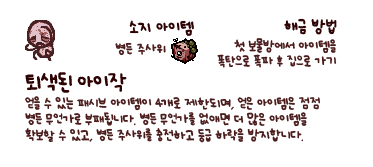
<style>
.page{position:relative;width:373px;height:167px;background:#ffffff}
.page>*{position:absolute;margin:0}
.t1{font:12px "UhBeeSe_hyunBold";color:#2e0304}
.t2{font:12px "UhBeeSe_hyunBold";letter-spacing:-0.1em;color:#2e0304}
.t3{font:12px "UhBeeSe_hyunBold";letter-spacing:-0.15em;color:#2e0304}
.t4{font:10px/14.5px "UhBeeSe_hyunBold";letter-spacing:-0.025em;color:#4b1c1c}
.t5{font:10px "UhBeeSe_hyunBold";color:#4b1c1c}
.t6{font:10px/16px "UhBeeSe_hyunBold";letter-spacing:-0.025em;color:#4b1c1c}
.t7{font:15.2px/24px "UhBeeSe_hyunBold";letter-spacing:-0.1em;color:#2e0304;scale:1.05 1}
.t8{font:16px/24px "UhBeeSe_hyunBold";letter-spacing:-0.05em;color:#2e0304}
.t9{font:16px/24px "UhBeeSe_hyunBold";letter-spacing:-0.025em;color:#2e0304}
.t10{font:10px/16px "UhBeeSe_hyunBold";letter-spacing:-0.25em;color:#4b1c1c}
.t11{font:10px/16px "UhBeeSe_hyunBold";letter-spacing:-0.125em;color:#4b1c1c}
.t12{font:10px/16px "UhBeeSe_hyunBold";letter-spacing:-0.1em;color:#4b1c1c}
</style>
<div class="page">
<p class="t1" style="left:129px;top:20px;width:65px;height:16px"><span class="t2">소</span>지 아이템</p>
<p class="t1" style="left:284px;top:18px;width:53px;height:17px">해금 방<span class="t3">법</span></p>
<p class="t4" style="left:217px;top:38px;width:120px;height:30px;text-align:right">첫 보물방에서 아이템을<br>폭탄으로 폭파 후 집으로 가기</p>
<p class="t5" style="left:115px;top:42px;width:51px;height:14px">병든 주사위</p>
<p class="t6" style="left:25px;top:72px;width:295px;height:71px"><span class="t7">토</span><span class="t8">ㅣ</span><span class="t9">색</span><span class="t8">된 아이작<br></span>얻을 수 있는 패시브 아이템이 <span class="t10">4</span>개로 제한되며, 얻은 아이템은 점점<br>병든 무언가로 부패됩니다. 병든 무언가를 없애면 더 많은 아이템을<br>확보할 수 있고, 병든 주사위를 충전하고 등급 <span class="t11">하</span>락을 <span class="t12">방</span>지합니다.</p>
</div>
